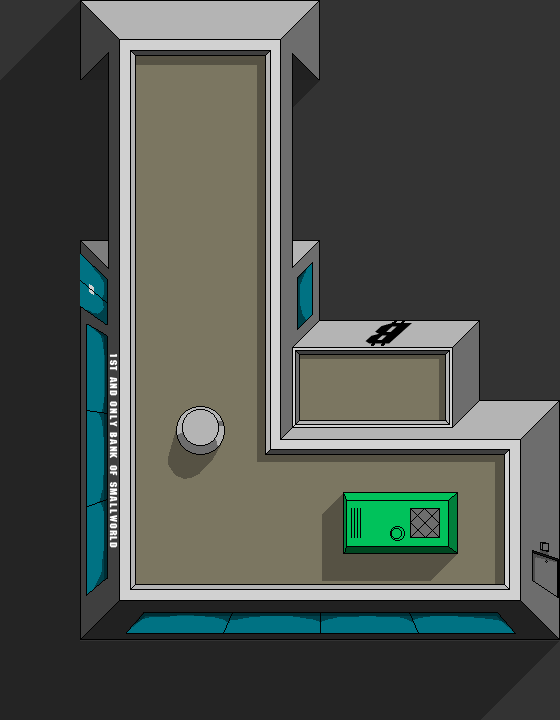
<style>
.page{position:relative;width:560px;height:720px;background:#242424}
.page>*{position:absolute;margin:0}
.t1{font:54px "ATROX-normal";letter-spacing:0.1em;color:#000000;scale:1.26 1}
.t2{font:12px "ATROX-normal";letter-spacing:0.1em;color:#ffffff}
</style>
<div class="page">
<p class="t1" style="left:365px;top:323px;width:47px;height:21px;rotate:180deg">B</p>
<p class="t2" style="left:109px;top:354px;width:9px;height:194px;rotate:90deg">1st and only bank of smallworld</p>
</div>
